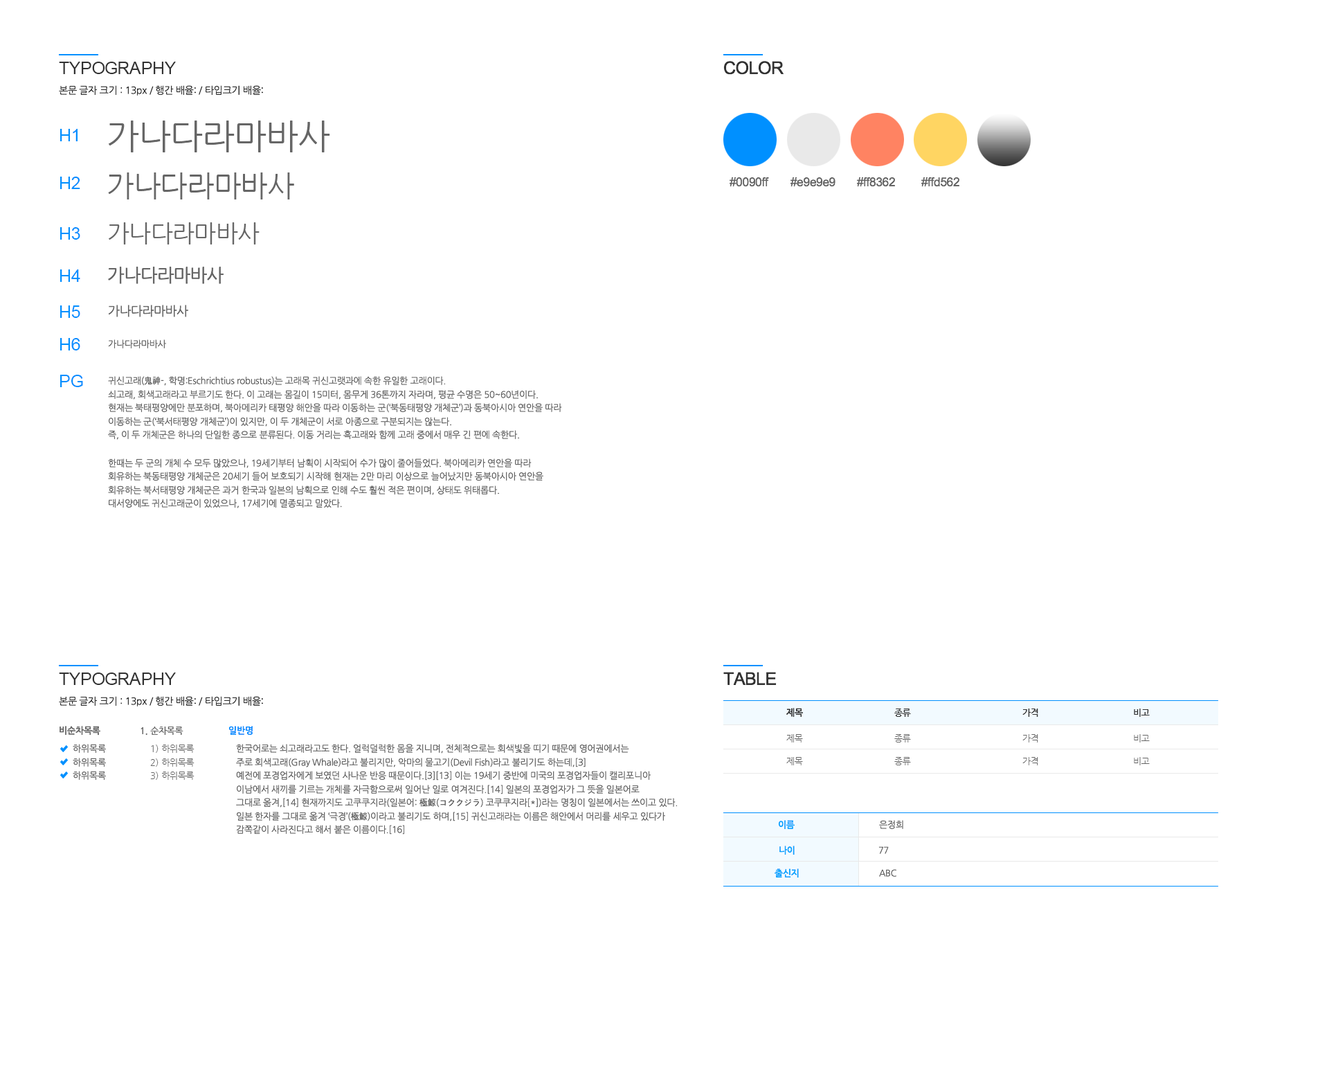
<style>
.page{position:relative;width:1329px;height:1077px;background:#ffffff}
.page>*{position:absolute;margin:0}
.t1{font:17.3px "ArialMT";letter-spacing:-0.02em;color:#333333}
.t2{font:9.7px "NanumGothic";letter-spacing:-0.02em;color:#333333}
.t3{font:34.6px "NanumGothic";letter-spacing:-0.02em;color:#666666}
.t4{font:17.3px "ArialMT";letter-spacing:-0.02em;color:#0090ff}
.t5{font:29.1px "NanumGothic";letter-spacing:-0.02em;color:#666666}
.t6{font:12px "ArialMT";letter-spacing:-0.02em;color:#666666}
.t7{font:23.5px "NanumGothic";letter-spacing:-0.02em;color:#666666}
.t8{font:18px "NanumGothic";letter-spacing:-0.02em;color:#666666}
.t9{font:12.5px "NanumGothic";letter-spacing:-0.02em;color:#666666}
.t10{font:9px "NanumGothic";letter-spacing:-0.02em;color:#666666}
.t11{font:9px "NanumGothicBold";letter-spacing:-0.02em;color:#333333}
.t12{font:9px "NanumGothicBold";letter-spacing:-0.02em;color:#666666}
.t13{font:9px "NanumGothicBold";letter-spacing:-0.02em;color:#0090ff}
.t14{font:9px "NanumGothicBold";letter-spacing:-0.02em;color:#07a6ff}
</style>
<div class="page">
<p class="t1" style="left:59px;top:62px;width:117px;height:12px">TYPOGRAPHY</p>
<p class="t1" style="left:723px;top:61px;width:61px;height:14px">COLOR</p>
<p class="t2" style="left:59px;top:85px;width:204px;height:11px">본문 글자 크기 : 13px / 행간 배율: / 타입크기 배율:</p>
<p class="t3" style="left:109px;top:120px;width:221px;height:32px">가나다라마바사</p>
<p class="t4" style="left:60px;top:129px;width:18px;height:12px">H1</p>
<p class="t5" style="left:108px;top:172px;width:186px;height:27px">가나다라마바사</p>
<p class="t4" style="left:60px;top:177px;width:20px;height:12px">H2</p>
<p class="t6" style="left:730px;top:177px;width:39px;height:10px">#0090ff</p>
<p class="t6" style="left:791px;top:177px;width:45px;height:10px">#e9e9e9</p>
<p class="t6" style="left:857px;top:177px;width:38px;height:10px">#ff8362</p>
<p class="t6" style="left:921px;top:177px;width:39px;height:10px">#ffd562</p>
<p class="t4" style="left:60px;top:227px;width:20px;height:13px">H3</p>
<p class="t7" style="left:109px;top:222px;width:151px;height:22px">가나다라마바사</p>
<p class="t4" style="left:60px;top:269px;width:20px;height:13px">H4</p>
<p class="t8" style="left:108px;top:267px;width:116px;height:17px">가나다라마바사</p>
<p class="t4" style="left:60px;top:305px;width:20px;height:13px">H5</p>
<p class="t9" style="left:108px;top:305px;width:80px;height:12px">가나다라마바사</p>
<p class="t4" style="left:60px;top:338px;width:20px;height:12px">H6</p>
<p class="t10" style="left:108px;top:339px;width:58px;height:9px">가나다라마바사</p>
<p class="t4" style="left:60px;top:375px;width:23px;height:12px">PG</p>
<p class="t10" style="left:108px;top:376px;width:454px;height:132px">귀신고래(鬼神-, 학명:Eschrichtius robustus)는 고래목 귀신고랫과에 속한 유일한 고래이다. <br>쇠고래, 회색고래라고 부르기도 한다. 이 고래는 몸길이 15미터, 몸무게 36톤까지 자라며, 평균 수명은 50~60년이다. <br>현재는 북태평양에만 분포하며, 북아메리카 태평양 해안을 따라 이동하는 군(‘북동태평양 개체군’)과 동북아시아 연안을 따라 <br>이동하는 군(‘북서태평양 개체군’)이 있지만, 이 두 개체군이 서로 아종으로 구분되지는 않는다. <br>즉, 이 두 개체군은 하나의 단일한 종으로 분류된다. 이동 거리는 흑고래와 함께 고래 중에서 매우 긴 편에 속한다.<br>한때는 두 군의 개체 수 모두 많았으나, 19세기부터 남획이 시작되어 수가 많이 줄어들었다. 북아메리카 연안을 따라 <br>회유하는 북동태평양 개체군은 20세기 들어 보호되기 시작해 현재는 2만 마리 이상으로 늘어났지만 동북아시아 연안을 <br>회유하는 북서태평양 개체군은 과거 한국과 일본의 남획으로 인해 수도 훨씬 적은 편이며, 상태도 위태롭다. <br>대서양에도 귀신고래군이 있었으나, 17세기에 멸종되고 말았다.</p>
<p class="t1" style="left:59px;top:672px;width:117px;height:13px">TYPOGRAPHY</p>
<p class="t1" style="left:723px;top:672px;width:54px;height:13px">TABLE</p>
<p class="t2" style="left:59px;top:696px;width:204px;height:10px">본문 글자 크기 : 13px / 행간 배율: / 타입크기 배율:</p>
<p class="t11" style="left:786px;top:708px;width:17px;height:9px">제목</p>
<p class="t11" style="left:894px;top:708px;width:17px;height:9px">종류</p>
<p class="t11" style="left:1023px;top:708px;width:15px;height:9px">가격</p>
<p class="t11" style="left:1134px;top:708px;width:16px;height:9px">비고</p>
<p class="t12" style="left:60px;top:726px;width:40px;height:9px">비순차목록</p>
<p class="t13" style="left:228px;top:726px;width:25px;height:9px">일반명</p>
<p class="t12" style="left:141px;top:726px;width:42px;height:9px">1. 순차목록</p>
<p class="t10" style="left:786px;top:734px;width:17px;height:8px">제목</p>
<p class="t10" style="left:894px;top:734px;width:17px;height:8px">종류</p>
<p class="t10" style="left:1023px;top:734px;width:15px;height:8px">가격</p>
<p class="t10" style="left:1134px;top:734px;width:16px;height:8px">비고</p>
<p class="t10" style="left:73px;top:744px;width:33px;height:36px">하위목록<br>하위목록<br>하위목록</p>
<p class="t10" style="left:150px;top:744px;width:45px;height:36px">1) 하위목록<br>2) 하위목록<br>3) 하위목록</p>
<p class="t10" style="left:236px;top:744px;width:442px;height:90px">한국어로는 쇠고래라고도 한다. 얼럭덜럭한 몸을 지니며, 전체적으로는 회색빛을 띠기 때문에 영어권에서는 <br>주로 회색고래(Gray Whale)라고 불리지만, 악마의 물고기(Devil Fish)라고 불리기도 하는데,[3] <br>예전에 포경업자에게 보였던 사나운 반응 때문이다.[3][13] 이는 19세기 중반에 미국의 포경업자들이 캘리포니아 <br>이남에서 새끼를 기르는 개체를 자극함으로써 일어난 일로 여겨진다.[14] 일본의 포경업자가 그 뜻을 일본어로 <br>그대로 옮겨,[14] 현재까지도 고쿠쿠지라(일본어: 極鯨(コククジラ) 코쿠쿠지라[*])라는 명칭이 일본에서는 쓰이고 있다. <br>일본 한자를 그대로 옮겨 ‘극경’(極鯨)이라고 불리기도 하며,[15] 귀신고래라는 이름은 해안에서 머리를 세우고 있다가 <br>감쪽같이 사라진다고 해서 붙은 이름이다.[16]</p>
<p class="t10" style="left:786px;top:757px;width:17px;height:8px">제목</p>
<p class="t10" style="left:894px;top:757px;width:17px;height:8px">종류</p>
<p class="t10" style="left:1023px;top:757px;width:15px;height:8px">가격</p>
<p class="t10" style="left:1134px;top:757px;width:16px;height:8px">비고</p>
<p class="t14" style="left:778px;top:820px;width:17px;height:9px">이름</p>
<p class="t10" style="left:879px;top:820px;width:24px;height:9px">은정희</p>
<p class="t14" style="left:780px;top:845px;width:15px;height:9px">나이</p>
<p class="t10" style="left:879px;top:846px;width:10px;height:8px">77</p>
<p class="t14" style="left:775px;top:868px;width:24px;height:9px">출신지</p>
<p class="t10" style="left:879px;top:869px;width:18px;height:7px">ABC</p>
</div>
